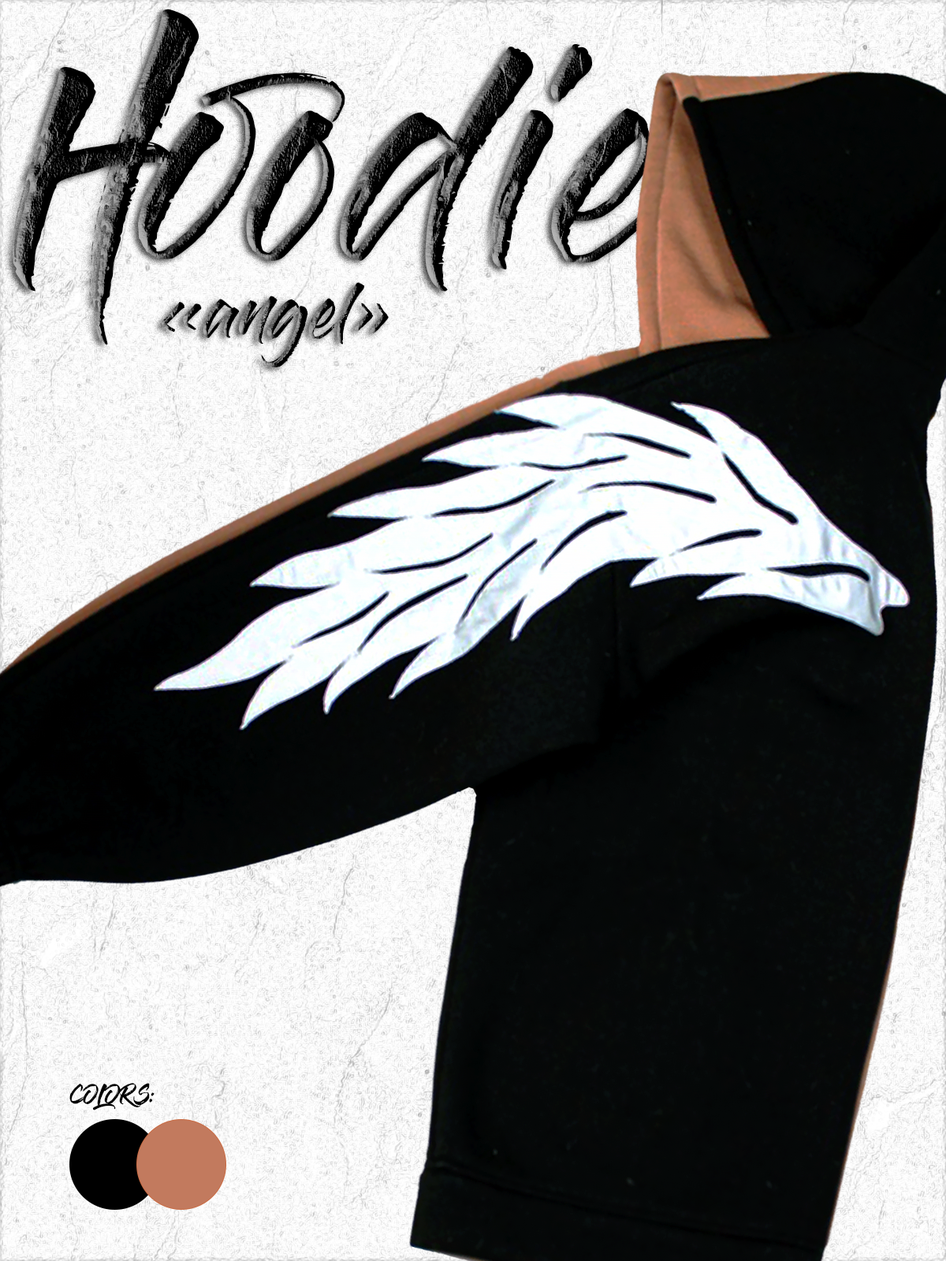
<style>
.page{position:relative;width:946px;height:1261px}
.page>*{position:absolute;margin:0}
.t1{font:219.9px "GlossAndBloom"}
.t2{font:56.7px "GlossAndBloom"}
.t3{font:18.9px "GlossAndBloom";color:#000000}
</style>
<div class="page">
<p class="t1" style="left:12px;top:9px;width:676px;height:336px">Hoodie</p>
<p class="t2" style="left:162px;top:282px;width:227px;height:85px">«angel»</p>
<p class="t3" style="left:69px;top:1083px;width:85px;height:27px">COLORS:</p>
</div>
